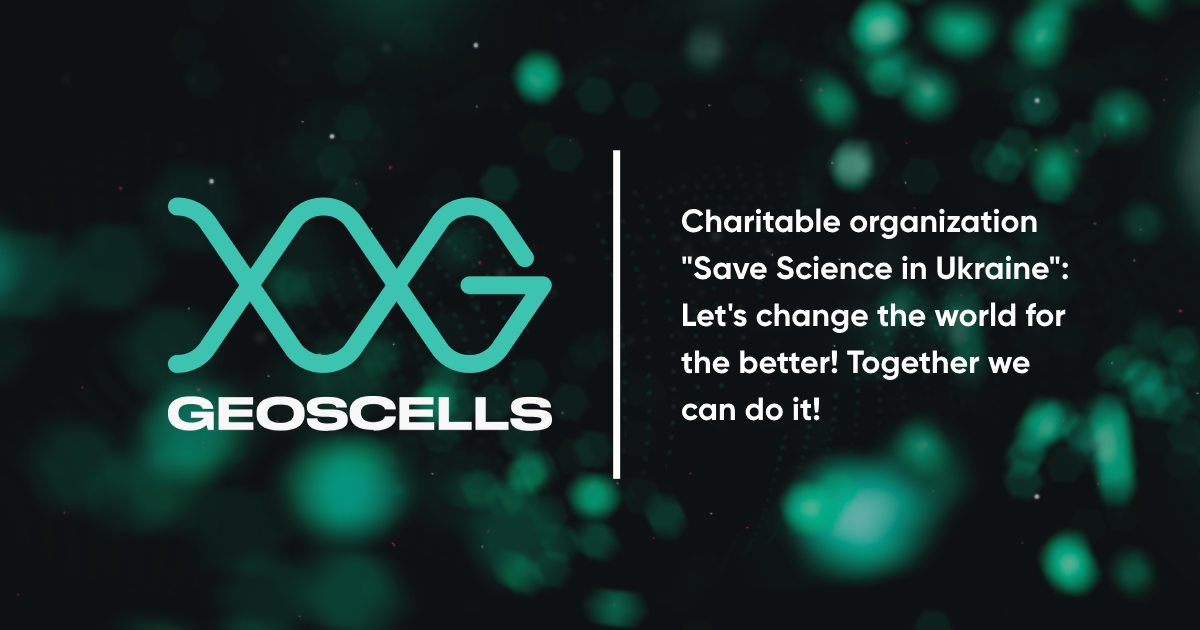
<style>
.page{position:relative;width:1200px;height:630px;background:#0e1113}
.page>*{position:absolute;margin:0}
.t1{font:32.2px/47.1px "Gilroy-Bold";color:#ffffff}
</style>
<div class="page">
<p class="t1" style="left:681px;top:208px;width:387px;height:213px">Charitable organization "Save Science in Ukraine":<br>Let's change the world for the better! Together we can do it!</p>
</div>
